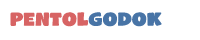
<style>
.page{position:relative;width:200px;height:40px;background:#ffffff}
.page>*{position:absolute;margin:0}
.t1{font:25px "NaughtySquirrelDemo";color:#d76464}
.t2{font:25px "NaughtySquirrelDemo";color:#4874a6}
.t3{font:25px "News706BT-BoldC";color:#ffffff}
.t4{font:12.5px "NaughtySquirrelDemo";color:#ffffff}
</style>
<div class="page">
<p class="t1" style="left:10px;top:12px;width:182px;height:15px">pentol<span class="t2">godok</span><span class="t3">.</span><span class="t4">com</span></p>
</div>
